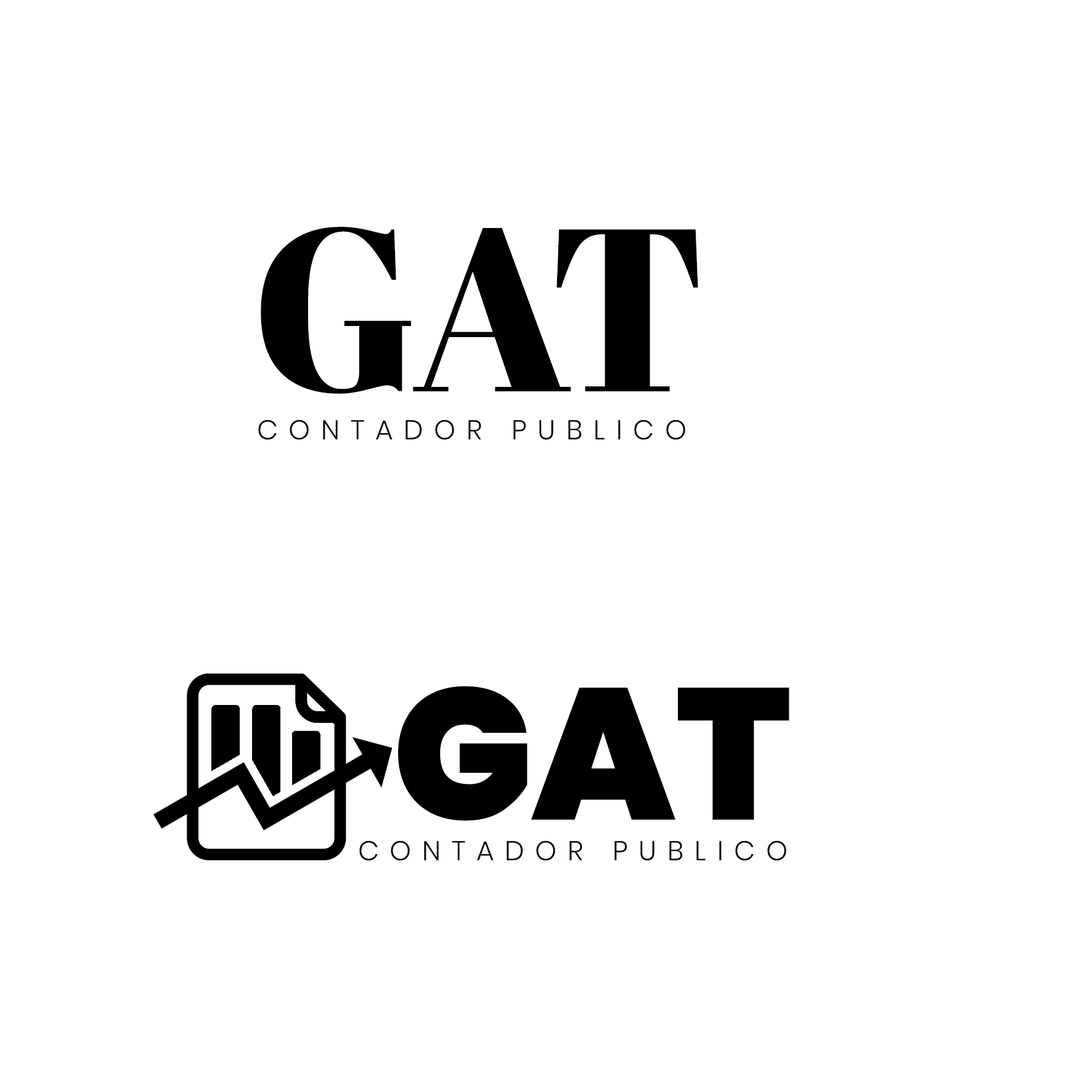
<style>
.page{position:relative;width:1092px;height:1092px;background:#ffffff}
.page>*{position:absolute;margin:0}
.t1{font:231.2px "AbrilFatface-Regular";color:#000000;text-transform:uppercase}
.t2{font:27.3px "Poppins-Light";letter-spacing:0.4em;color:#000000;text-transform:uppercase}
.t3{font:186.5px "Poppins-Black";color:#000000;text-transform:uppercase}
</style>
<div class="page">
<p class="t1" style="left:261px;top:227px;width:437px;height:167px">GAT</p>
<p class="t2" style="left:258px;top:420px;width:427px;height:20px">CONTADOR PUBLICO</p>
<p class="t3" style="left:398px;top:686px;width:391px;height:135px">GAT</p>
<p class="t2" style="left:359px;top:841px;width:427px;height:20px">CONTADOR PUBLICO</p>
</div>
